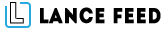
<style>
.page{position:relative;width:168px;height:30px;background:#ffffff}
.page>*{position:absolute;margin:0}
.t1{font:29.8px "Intro-Inline";letter-spacing:0.02em;color:#ffffff;font-weight:bold}
.t2{font:21.7px "Intro";letter-spacing:0.02em;color:#000000;font-weight:bold;scale:0.85 1}
</style>
<div class="page">
<p class="t1" style="left:10px;top:2px;width:14px;height:22px">L</p>
<p class="t2" style="left:40px;top:7px;width:121px;height:17px">Lance Feed</p>
</div>
